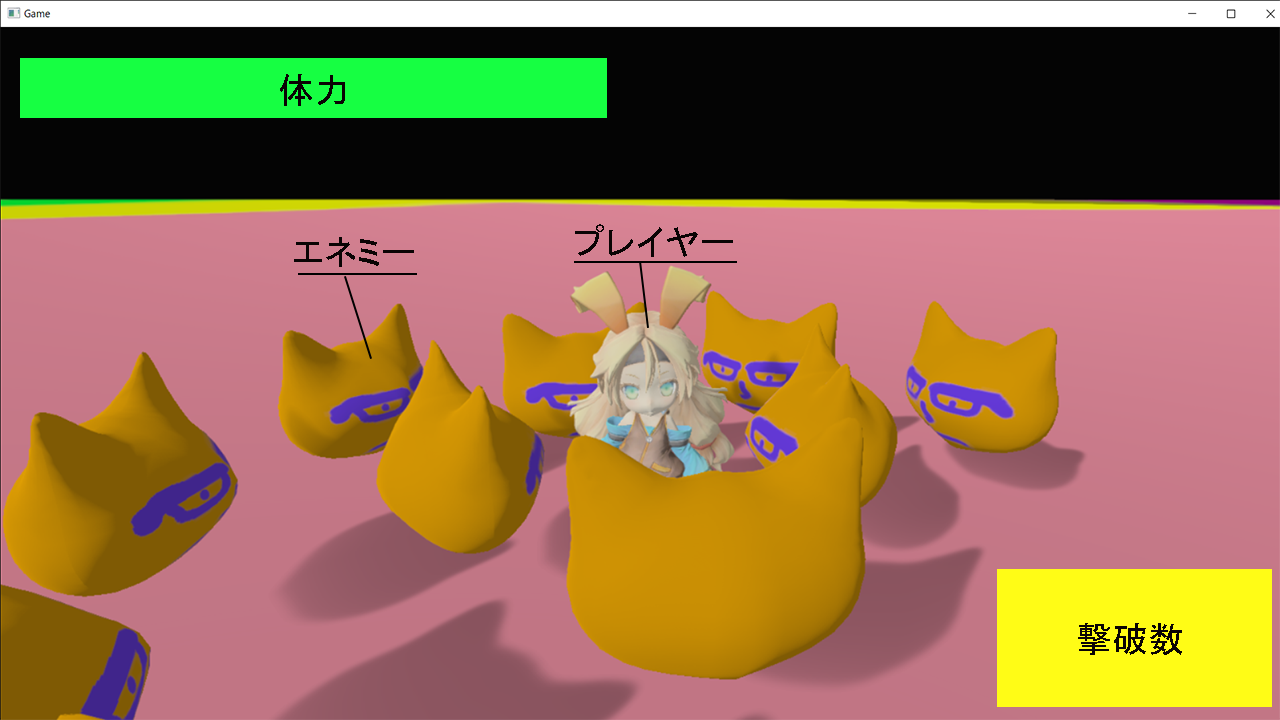
<style>
.page{position:relative;width:1280px;height:720px}
.page>*{position:absolute;margin:0}
.t1{font:36px "MS-PGothic";color:#0a0404}
</style>
<div class="page">
<p class="t1" style="left:280px;top:74px;width:65px;height:32px">体力</p>
<p class="t1" style="left:575px;top:224px;width:158px;height:33px">プレイヤー</p>
<p class="t1" style="left:294px;top:237px;width:120px;height:30px">エネミー</p>
<p class="t1" style="left:1078px;top:623px;width:104px;height:32px">撃破数</p>
</div>
